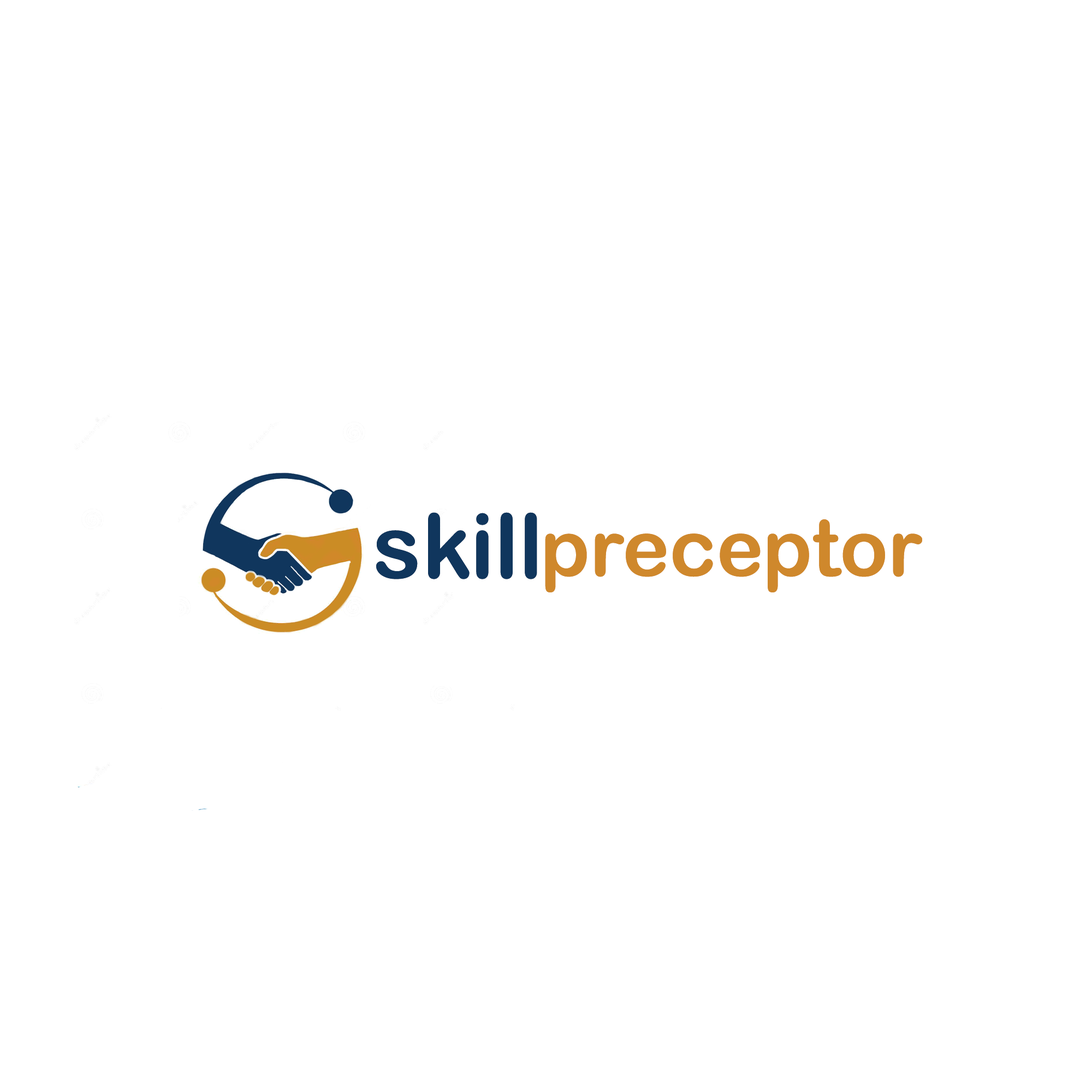
<style>
.page{position:relative;width:1092px;height:1092px;background:#ffffff}
.page>*{position:absolute;margin:0}
.t1{font:89.5px "ArialRoundedMTBold";color:#10365d}
.t2{font:79.2px "ArialRoundedMTBold";color:#cf882c}
</style>
<div class="page">
<p class="t1" style="left:376px;top:512px;width:161px;height:67px">skill</p>
<p class="t1" style="left:376px;top:512px;width:161px;height:67px">skill</p>
<p class="t2" style="left:545px;top:519px;width:377px;height:73px">preceptor</p>
<p class="t2" style="left:545px;top:519px;width:377px;height:73px">preceptor</p>
</div>
